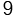
<style>
.page{position:relative;width:16px;height:16px;background:#ffffff}
.page>*{position:absolute;margin:0}
.t1{font:20px "DengXian";color:#000000}
</style>
<div class="page">
<p class="t1" style="left:3px;top:1px;width:10px;height:14px">9</p>
</div>
